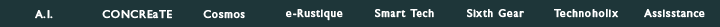
<style>
.page{position:relative;width:720px;height:27px;background:#1e3639}
.page>*{position:absolute;margin:0}
.t1{font:11.6px "GillSans";letter-spacing:0.06em;color:#ffffff;font-weight:bold;scale:0.95 1}
</style>
<div class="page">
<p class="t1" style="left:35px;top:10px;width:18px;height:9px">A.I.</p>
<p class="t1" style="left:102px;top:10px;width:70px;height:9px">CONCREaTE</p>
<p class="t1" style="left:203px;top:10px;width:42px;height:9px">Cosmos</p>
<p class="t1" style="left:286px;top:9px;width:57px;height:12px">e-Rustique</p>
<p class="t1" style="left:375px;top:9px;width:59px;height:9px">Smart Tech</p>
<p class="t1" style="left:467px;top:9px;width:57px;height:9px">Sixth Gear</p>
<p class="t1" style="left:554px;top:9px;width:65px;height:9px">Technoholix</p>
<p class="t1" style="left:644px;top:9px;width:61px;height:9px">Assisstance</p>
</div>
